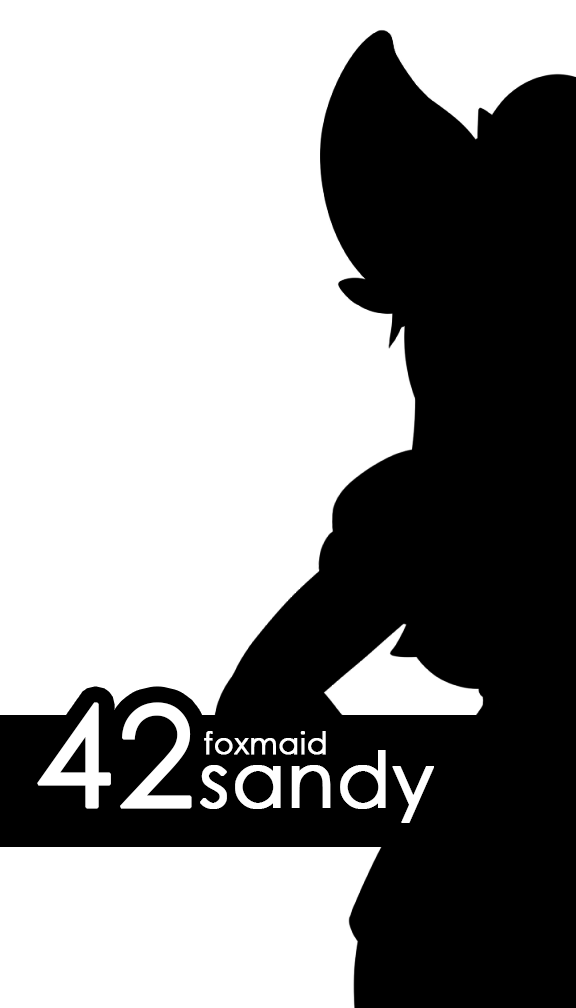
<style>
.page{position:relative;width:576px;height:1008px;background:#ffffff}
.page>*{position:absolute;margin:0}
.t1{font:77.8px "CenturyGothic";color:#ffffff;font-weight:bold}
.t2{font:140.8px "CenturyGothic";color:#ffffff;font-weight:bold}
.t3{font:30px "CenturyGothic";color:#ffffff;font-weight:bold}
</style>
<div class="page">
<p class="t1" style="left:37px;top:702px;width:397px;height:121px"><span class="t2">42</span>sandy</p>
<p class="t3" style="left:204px;top:731px;width:122px;height:24px">foxmaid</p>
</div>
